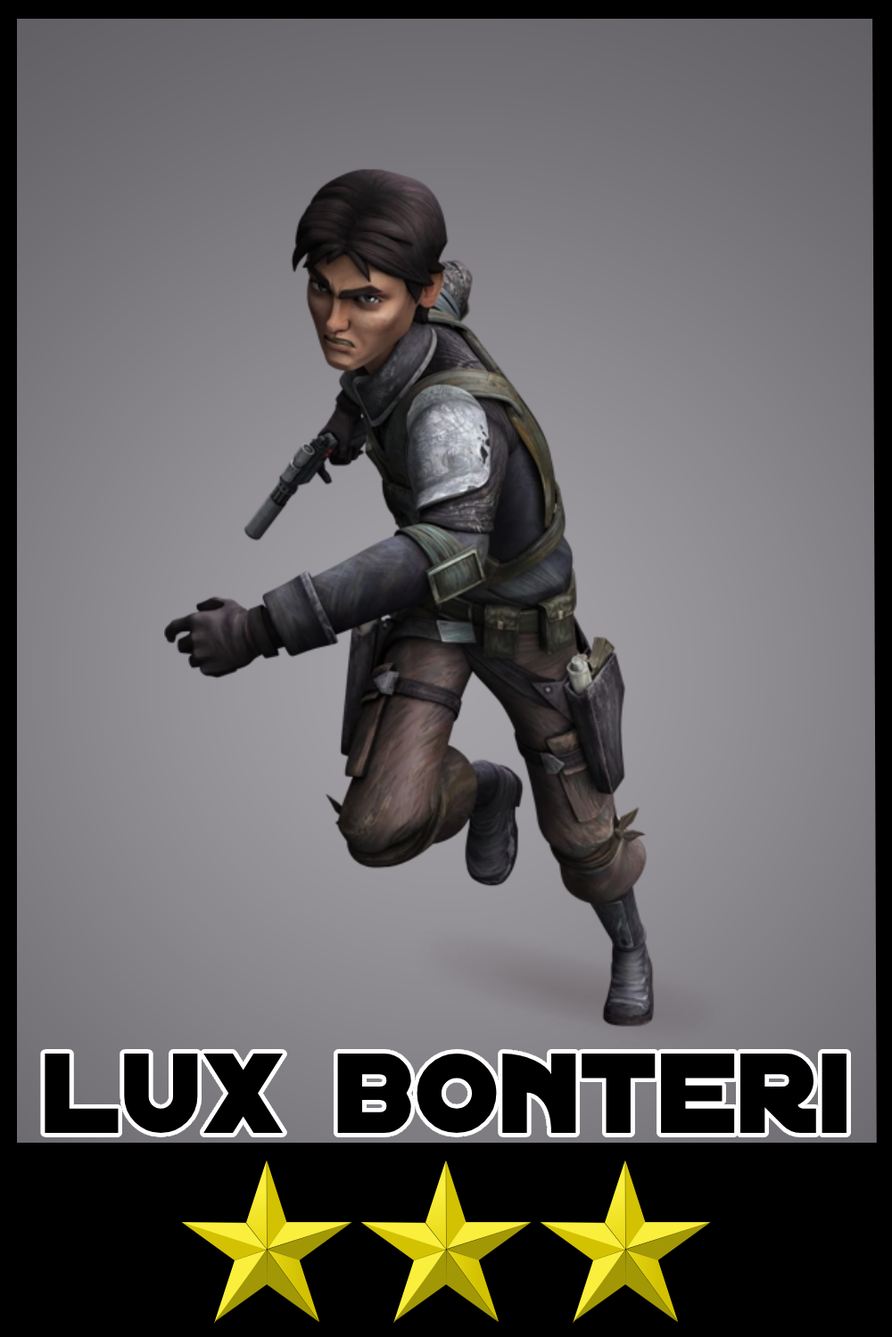
<style>
.page{position:relative;width:892px;height:1337px}
.page>*{position:absolute;margin:0}
.t1{font:121.9px "DistantGalaxy";color:#000000}
</style>
<div class="page">
<p class="t1" style="left:45px;top:1054px;width:801px;height:79px">lux bonteri</p>
</div>
